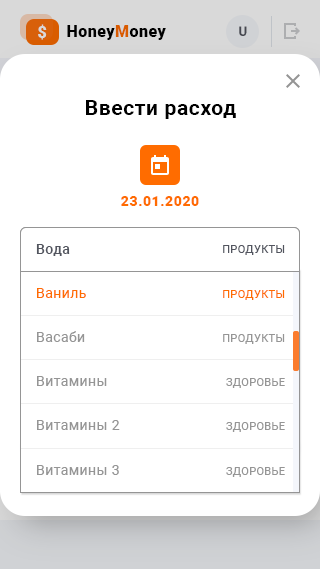
<style>
.page{position:relative;width:320px;height:569px;background:#ffffff}
.page>*{position:absolute;margin:0}
.t1{font:16px "Roboto-Black";letter-spacing:0.03em;color:#d9d9d9}
.t2{font:16px "Roboto-Black";letter-spacing:0.03em;color:#000000}
.t3{font:16px "Roboto-Black";letter-spacing:0.03em;color:#ff6c00}
.t4{font:13px "Roboto-Medium";letter-spacing:0.035em;color:#52555f}
.t5{font:21px "Roboto-Bold";letter-spacing:0.03em;color:#000000}
.t6{font:14px "Roboto-Black";letter-spacing:0.04em;color:#ff6c00}
.t7{font:14px "Roboto-Medium";letter-spacing:0.03em;color:#52555f}
.t8{font:11px "Roboto-Regular";letter-spacing:0.03em;color:#52555f;text-transform:uppercase}
.t9{font:14px "Roboto-Regular";letter-spacing:0.03em;color:#ff6c00}
.t10{font:11px "Roboto-Regular";letter-spacing:0.03em;color:#ff6c00;text-transform:uppercase}
.t11{font:14px "Roboto-Regular";letter-spacing:0.03em;color:#959595}
.t12{font:11px "Roboto-Regular";letter-spacing:0.03em;color:#959595;text-transform:uppercase}
</style>
<div class="page">
<p class="t1" style="left:38px;top:24px;width:9px;height:16px">$</p>
<p class="t2" style="left:67px;top:25px;width:99px;height:15px">Honey<span class="t3">M</span>oney</p>
<p class="t4" style="left:239px;top:26px;width:8px;height:10px">U</p>
<p class="t5" style="left:86px;top:100px;width:150px;height:19px">Ввести расход</p>
<p class="t6" style="left:121px;top:196px;width:78px;height:10px">23.01.2020</p>
<p class="t7" style="left:36px;top:244px;width:34px;height:12px">Вода</p>
<p class="t8" style="left:223px;top:245px;width:62px;height:10px">Продукты</p>
<p class="t9" style="left:37px;top:288px;width:49px;height:10px">Ваниль</p>
<p class="t10" style="left:223px;top:290px;width:62px;height:10px">Продукты</p>
<p class="t11" style="left:37px;top:331px;width:48px;height:11px">Васаби</p>
<p class="t12" style="left:223px;top:334px;width:62px;height:10px">Продукты</p>
<p class="t11" style="left:37px;top:376px;width:70px;height:10px">Витамины</p>
<p class="t12" style="left:226px;top:378px;width:59px;height:10px">Здоровье</p>
<p class="t11" style="left:37px;top:420px;width:83px;height:10px">Витамины 2</p>
<p class="t12" style="left:226px;top:422px;width:59px;height:10px">Здоровье</p>
<p class="t11" style="left:37px;top:465px;width:82px;height:10px">Витамины 3</p>
<p class="t12" style="left:226px;top:467px;width:59px;height:10px">Здоровье</p>
</div>
